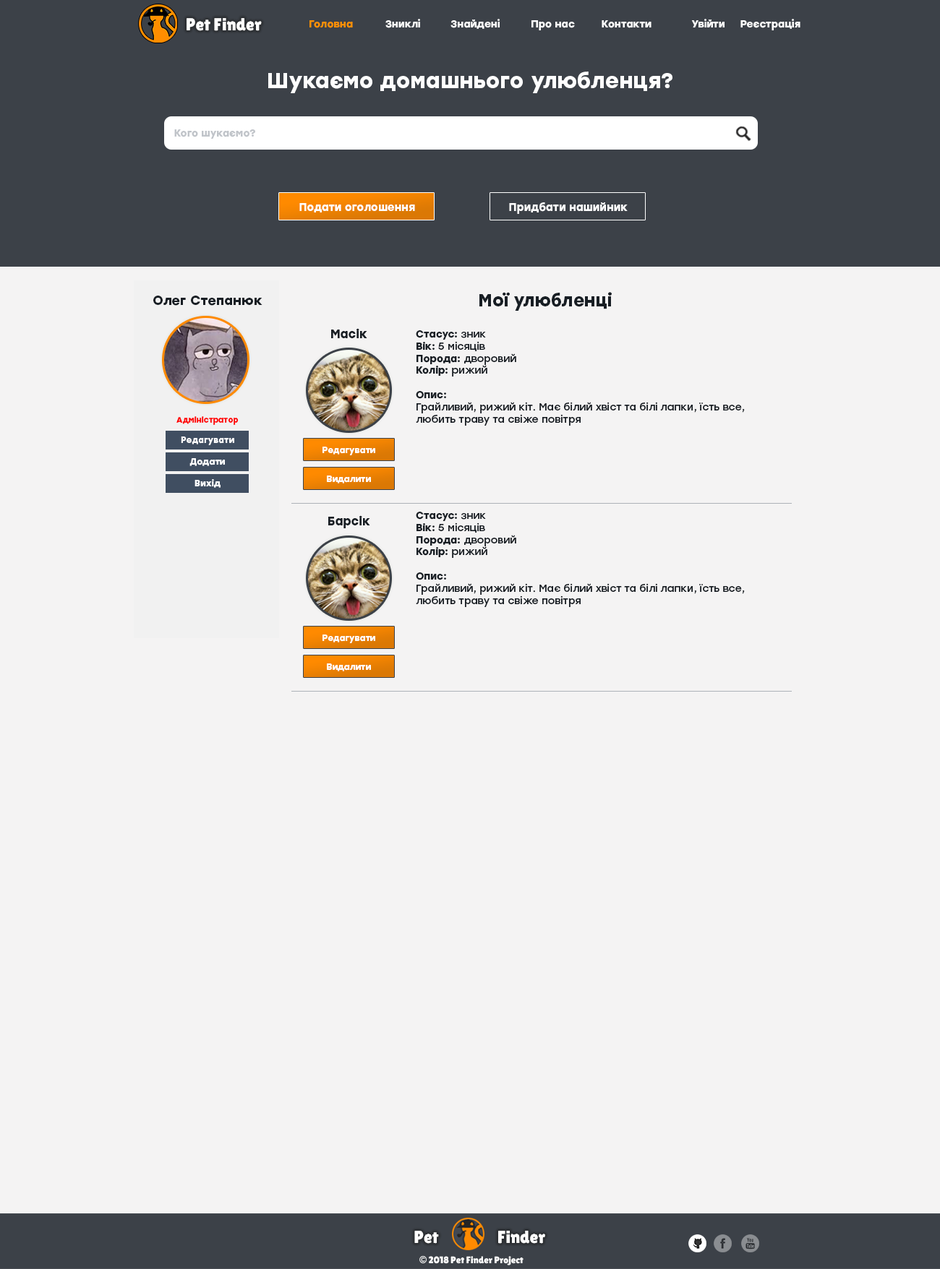
<style>
.page{position:relative;width:940px;height:1269px;background:#f4f3f3}
.page>*{position:absolute;margin:0}
.t1{font:17.3px "LilitaOne";color:#ffffff}
.t2{font:10.2px "Stolzl-Bold";color:#ff9001}
.t3{font:10.2px "Stolzl-Bold";color:#ffffff}
.t4{font:21.7px "Stolzl-Bold";color:#ffffff}
.t5{font:10.1px "Stolzl-Bold";color:#c0c4c9}
.t6{font:10.8px "Stolzl-Bold";color:#ffffff}
.t7{font:17.3px "Stolzl-Bold";color:#181e24}
.t8{font:13.2px "Stolzl-Bold";color:#181e24}
.t9{font:12.1px "Stolzl-Bold";color:#181e24}
.t10{font:10.1px "Stolzl-Regular";color:#181e24}
.t11{font:10.1px "Stolzl-Bold";color:#181e24}
.t12{font:8px "Stolzl-Bold";color:#ff0000}
.t13{font:8.7px "Stolzl-Bold";color:#ffffff}
.t14{font:8.9px "Stolzl-Bold";color:#ffffff}
.t15{font:9.6px "LilitaOne";color:#ffffff}
.t16{font:9.6px "GillSans-UltraBold";color:#ffffff}
</style>
<div class="page">
<p class="t1" style="left:186px;top:18px;width:76px;height:13px">Pet Finder</p>
<p class="t2" style="left:309px;top:20px;width:44px;height:8px">Головна</p>
<p class="t3" style="left:385px;top:19px;width:35px;height:9px">Зниклі</p>
<p class="t3" style="left:450px;top:19px;width:49px;height:10px">Знайдені</p>
<p class="t3" style="left:531px;top:20px;width:44px;height:10px">Про нас</p>
<p class="t3" style="left:601px;top:20px;width:50px;height:8px">Контакти</p>
<p class="t3" style="left:691px;top:19px;width:33px;height:8px">Увійти</p>
<p class="t3" style="left:740px;top:19px;width:60px;height:11px">Реєстрація</p>
<p class="t4" style="left:268px;top:72px;width:404px;height:21px">Шукаємо домашнього улюбленця?</p>
<p class="t5" style="left:174px;top:129px;width:81px;height:10px">Кого шукаємо?</p>
<p class="t6" style="left:299px;top:203px;width:116px;height:9px">Подати оголошення</p>
<p class="t6" style="left:509px;top:202px;width:118px;height:12px">Придбати нашийник</p>
<p class="t7" style="left:479px;top:292px;width:132px;height:19px">Мої улюбленці</p>
<p class="t8" style="left:153px;top:296px;width:109px;height:10px">Олег Степанюк</p>
<p class="t9" style="left:331px;top:328px;width:36px;height:10px">Масік</p>
<p class="t10" style="left:416px;top:330px;width:328px;height:96px"><span class="t11">Стасус: </span>зник<br><span class="t11">Вік: </span>5 місяців<br><span class="t11">Порода: </span>дворовий<br><span class="t11">Колір: </span>рижий<br><span class="t11"><br>Опис: <br></span>Грайливий, рижий кіт. Має білий хвіст та білі лапки, їсть все,<br>любить траву та свіже повітря</p>
<p class="t12" style="left:176px;top:416px;width:63px;height:9px">Адміністратор</p>
<p class="t13" style="left:181px;top:437px;width:53px;height:8px">Редагувати</p>
<p class="t13" style="left:322px;top:447px;width:53px;height:8px">Редагувати</p>
<p class="t14" style="left:189px;top:458px;width:36px;height:8px">Додати</p>
<p class="t14" style="left:194px;top:479px;width:26px;height:9px">Вихід</p>
<p class="t13" style="left:327px;top:476px;width:44px;height:8px">Видалити</p>
<p class="t9" style="left:328px;top:515px;width:42px;height:13px">Барсік</p>
<p class="t10" style="left:416px;top:512px;width:328px;height:95px"><span class="t11">Стасус: </span>зник<br><span class="t11">Вік: </span>5 місяців<br><span class="t11">Порода: </span>дворовий<br><span class="t11">Колір: </span>рижий<br><span class="t11"><br>Опис: <br></span>Грайливий, рижий кіт. Має білий хвіст та білі лапки, їсть все,<br>любить траву та свіже повітря</p>
<p class="t13" style="left:322px;top:635px;width:53px;height:8px">Редагувати</p>
<p class="t13" style="left:327px;top:663px;width:44px;height:8px">Видалити</p>
<p class="t1" style="left:414px;top:1231px;width:25px;height:13px">Pet</p>
<p class="t1" style="left:498px;top:1231px;width:47px;height:13px">Finder</p>
<p class="t15" style="left:419px;top:1256px;width:104px;height:10px"><span class="t16">©</span> 2018 Pet Finder Project</p>
</div>
